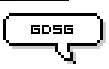
<style>
.page{position:relative;width:109px;height:69px;background:#ffffff}
.page>*{position:absolute;margin:0}
.t1{font:24px "VisitorTT2BRK";color:#000000;text-transform:uppercase}
</style>
<div class="page">
<p class="t1" style="left:31px;top:25px;width:42px;height:9px">gdsg</p>
</div>
